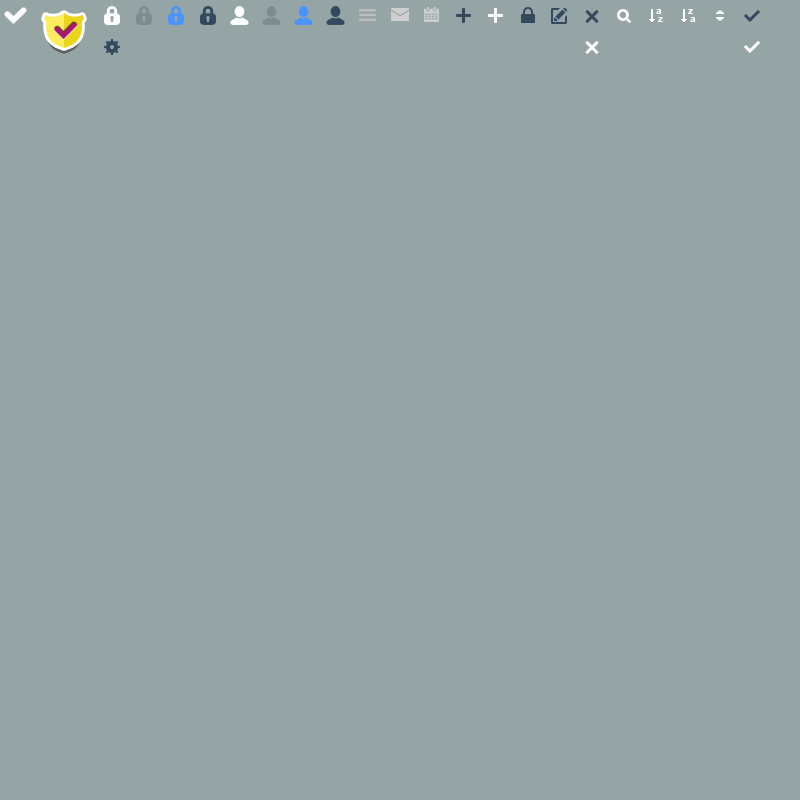
<style>
.page{position:relative;width:800px;height:800px;background:#95a5a6}
.page>*{position:absolute;margin:0}
.t1{font:10px "Arial-BoldMT";color:#ffffff}
</style>
<div class="page">
<p class="t1" style="left:656px;top:9px;width:6px;height:5px">a</p>
<p class="t1" style="left:658px;top:17px;width:5px;height:5px">z</p>
<p class="t1" style="left:688px;top:9px;width:5px;height:5px">z</p>
<p class="t1" style="left:690px;top:17px;width:6px;height:5px">a</p>
</div>
